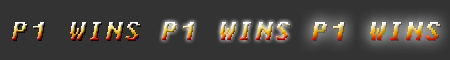
<style>
.page{position:relative;width:450px;height:60px;background:#333333}
.page>*{position:absolute;margin:0}
.t1{font:27.7px "Fixedsys";letter-spacing:0.04em;font-style:italic}
</style>
<div class="page">
<p class="t1" style="left:12px;top:22px;width:128px;height:18px">P1 WINS</p>
<p class="t1" style="left:162px;top:22px;width:128px;height:18px">P1 WINS</p>
<p class="t1" style="left:312px;top:22px;width:128px;height:18px">P1 WINS</p>
</div>
